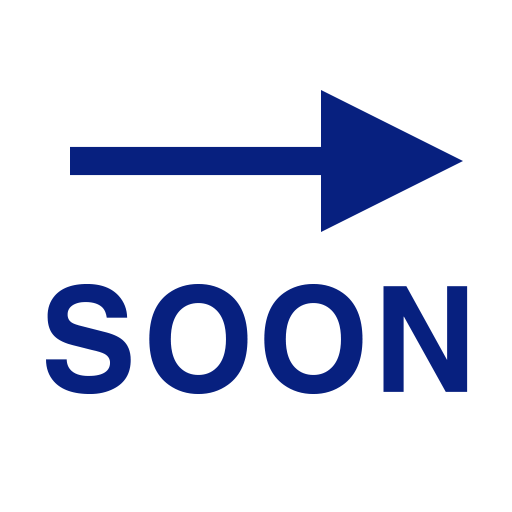
<style>
.page{position:relative;width:512px;height:512px;background:#ffffff}
.page>*{position:absolute;margin:0}
.t1{font:138px "H2gtrE";color:#07207f}
</style>
<div class="page">
<p class="t1" style="left:46px;top:284px;width:422px;height:110px">SOON</p>
</div>
